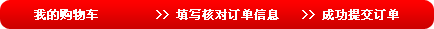
<style>
.page{position:relative;width:434px;height:29px}
.page>*{position:absolute;margin:0}
.t1{font:12px "SimSun";color:#ffffff;font-weight:bold}
</style>
<div class="page">
<p class="t1" style="left:34px;top:9px;width:365px;height:11px">我的购物车        &gt;&gt; 填写核对订单信息   &gt;&gt; 成功提交订单</p>
</div>
